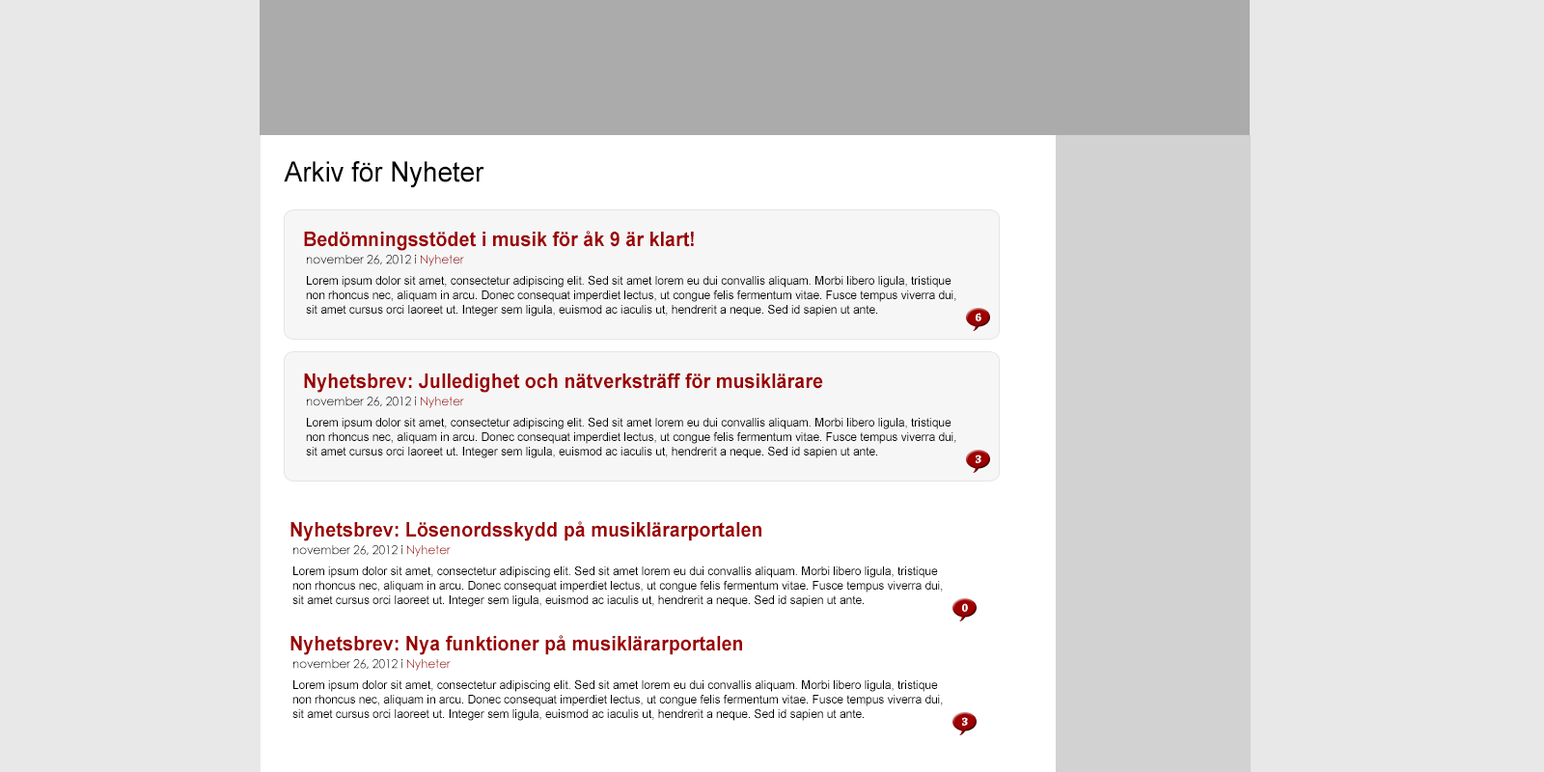
<style>
.page{position:relative;width:1544px;height:772px;background:#e8e8e8}
.page>*{position:absolute;margin:0}
.t1{font:28.2px "ArialMT";color:#000000;scale:0.95 1}
.t2{font:20.1px "Arial-BoldMT";color:#9c0000;scale:0.95 1}
.t3{font:12.1px "CenturyGothic";scale:0.95 1}
.t4{font:12.1px "ArialMT";color:#000000;scale:0.95 1}
.t5{font:12.1px "ChaparralPro-Bold";color:#ffffff;scale:0.95 1}
</style>
<div class="page">
<p class="t1" style="left:284px;top:161px;width:201px;height:27px">Arkiv för Nyheter</p>
<p class="t2" style="left:304px;top:231px;width:390px;height:20px">Bedömningsstödet i musik för åk 9 är klart!</p>
<p class="t3" style="left:307px;top:255px;width:157px;height:11px">november 26, 2012 i Nyheter</p>
<p class="t4" style="left:306px;top:275px;width:651px;height:42px">Lorem ipsum dolor sit amet, consectetur adipiscing elit. Sed sit amet lorem eu dui convallis aliquam. Morbi libero ligula, tristique non rhoncus nec, aliquam in arcu. Donec consequat imperdiet lectus, ut congue felis fermentum vitae. Fusce tempus viverra dui, sit amet cursus orci laoreet ut. Integer sem ligula, euismod ac iaculis ut, hendrerit a neque. Sed id sapien ut ante.</p>
<p class="t5" style="left:976px;top:313px;width:6px;height:8px">6</p>
<p class="t2" style="left:304px;top:373px;width:519px;height:20px">Nyhetsbrev: Julledighet och nätverksträff för musiklärare</p>
<p class="t3" style="left:307px;top:397px;width:157px;height:11px">november 26, 2012 i Nyheter</p>
<p class="t4" style="left:306px;top:417px;width:651px;height:41px">Lorem ipsum dolor sit amet, consectetur adipiscing elit. Sed sit amet lorem eu dui convallis aliquam. Morbi libero ligula, tristique non rhoncus nec, aliquam in arcu. Donec consequat imperdiet lectus, ut congue felis fermentum vitae. Fusce tempus viverra dui, sit amet cursus orci laoreet ut. Integer sem ligula, euismod ac iaculis ut, hendrerit a neque. Sed id sapien ut ante.</p>
<p class="t5" style="left:976px;top:455px;width:6px;height:8px">3</p>
<p class="t2" style="left:291px;top:521px;width:471px;height:20px">Nyhetsbrev: Lösenordsskydd på musiklärarportalen</p>
<p class="t3" style="left:293px;top:545px;width:158px;height:12px">november 26, 2012 i Nyheter</p>
<p class="t4" style="left:292px;top:566px;width:651px;height:41px">Lorem ipsum dolor sit amet, consectetur adipiscing elit. Sed sit amet lorem eu dui convallis aliquam. Morbi libero ligula, tristique non rhoncus nec, aliquam in arcu. Donec consequat imperdiet lectus, ut congue felis fermentum vitae. Fusce tempus viverra dui, sit amet cursus orci laoreet ut. Integer sem ligula, euismod ac iaculis ut, hendrerit a neque. Sed id sapien ut ante.</p>
<p class="t5" style="left:962px;top:603px;width:6px;height:9px">0</p>
<p class="t2" style="left:291px;top:635px;width:451px;height:20px">Nyhetsbrev: Nya funktioner på musiklärarportalen</p>
<p class="t3" style="left:293px;top:659px;width:158px;height:12px">november 26, 2012 i Nyheter</p>
<p class="t4" style="left:292px;top:679px;width:651px;height:42px">Lorem ipsum dolor sit amet, consectetur adipiscing elit. Sed sit amet lorem eu dui convallis aliquam. Morbi libero ligula, tristique non rhoncus nec, aliquam in arcu. Donec consequat imperdiet lectus, ut congue felis fermentum vitae. Fusce tempus viverra dui, sit amet cursus orci laoreet ut. Integer sem ligula, euismod ac iaculis ut, hendrerit a neque. Sed id sapien ut ante.</p>
<p class="t5" style="left:962px;top:717px;width:6px;height:9px">3</p>
</div>
